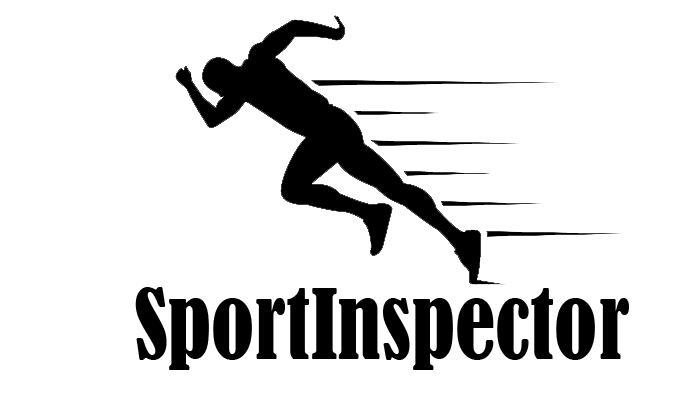
<style>
.page{position:relative;width:696px;height:410px;background:#ffffff}
.page>*{position:absolute;margin:0}
.t1{font:90px "BernardMT-Condensed";color:#000000}
</style>
<div class="page">
<p class="t1" style="left:135px;top:287px;width:494px;height:83px">SportInspector</p>
</div>
